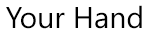
<style>
.page{position:relative;width:149px;height:36px;background:#ffffff}
.page>*{position:absolute;margin:0}
.t1{font:30px "NirmalaUI";color:#000000}
</style>
<div class="page">
<p class="t1" style="left:6px;top:5px;width:136px;height:24px">Your Hand</p>
</div>
